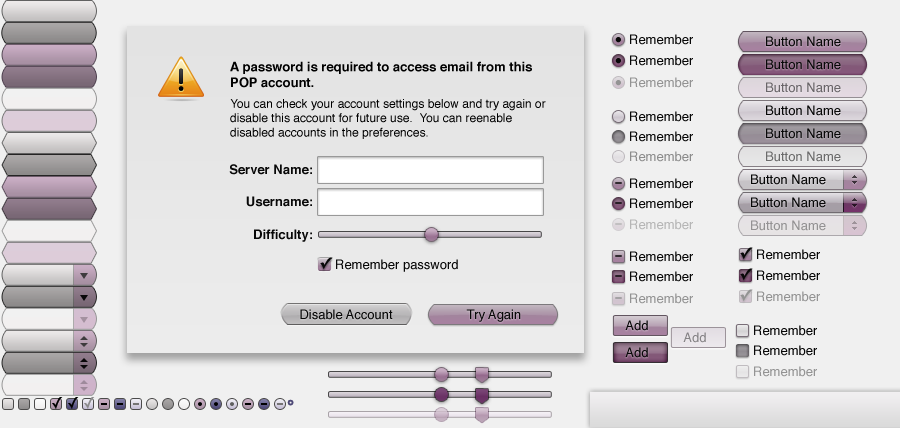
<style>
.page{position:relative;width:900px;height:428px;background:#f0f0f0}
.page>*{position:absolute;margin:0}
.t1{font:11px "LucidaGrande-Bold";color:#080808}
.t2{font:13px "Helvetica";color:#080808}
.t3{font:13px "Helvetica-Bold";color:#000000}
.t4{font:13px "Helvetica";color:#939393}
.t5{font:11px "LucidaGrande-Bold";color:#939393}
.t6{font:13px "Helvetica";color:#6a6669}
.t7{font:12px "Helvetica";color:#000000}
.t8{font:13px "Helvetica";color:#8c8c8c}
.t9{font:13px "Helvetica";color:#6c6b6c}
.t10{font:13px "Helvetica-Bold";color:#080808}
.t11{font:16px "LucidaGrande-Bold";scale:0.9 1}
.t12{font:13px "Helvetica";color:#b6b6b6}
.t13{font:13px "Helvetica";color:#949293}
.t14{font:16px "LucidaGrande-Bold";color:#080808}
.t15{font:16px "LucidaGrande-Bold";color:#939393}
.t16{font:13px "Helvetica";color:#858385}
</style>
<div class="page">
<p class="t1" style="left:615px;top:37px;width:6px;height:6px">•</p>
<p class="t2" style="left:630px;top:34px;width:63px;height:11px">Remember</p>
<p class="t2" style="left:766px;top:36px;width:75px;height:11px">Button Name</p>
<p class="t3" style="left:230px;top:61px;width:302px;height:27px">A password is required to access email from this POP account.</p>
<p class="t1" style="left:615px;top:58px;width:6px;height:6px">•</p>
<p class="t2" style="left:630px;top:55px;width:63px;height:11px">Remember</p>
<p class="t2" style="left:766px;top:59px;width:75px;height:11px">Button Name</p>
<p class="t4" style="left:630px;top:77px;width:63px;height:11px">Remember</p>
<p class="t5" style="left:615px;top:80px;width:6px;height:6px">•</p>
<p class="t6" style="left:766px;top:82px;width:75px;height:11px">Button Name</p>
<p class="t7" style="left:230px;top:99px;width:316px;height:40px">You can check your account settings below and try again or disable this account for future use.  You can reenable disabled accounts in the preferences.</p>
<p class="t2" style="left:630px;top:111px;width:63px;height:11px">Remember</p>
<p class="t2" style="left:766px;top:105px;width:75px;height:11px">Button Name</p>
<p class="t2" style="left:630px;top:131px;width:63px;height:11px">Remember</p>
<p class="t2" style="left:766px;top:128px;width:75px;height:11px">Button Name</p>
<p class="t8" style="left:630px;top:151px;width:63px;height:11px">Remember</p>
<p class="t9" style="left:766px;top:151px;width:75px;height:11px">Button Name</p>
<p class="t10" style="left:229px;top:164px;width:83px;height:11px">Server Name:</p>
<p class="t2" style="left:751px;top:174px;width:75px;height:11px">Button Name</p>
<p class="t11" style="left:615px;top:182px;width:7px;height:2px">-</p>
<p class="t2" style="left:630px;top:178px;width:63px;height:11px">Remember</p>
<p class="t10" style="left:246px;top:196px;width:66px;height:11px">Username:</p>
<p class="t2" style="left:630px;top:198px;width:63px;height:11px">Remember</p>
<p class="t2" style="left:751px;top:197px;width:75px;height:11px">Button Name</p>
<p class="t11" style="left:615px;top:202px;width:7px;height:2px">-</p>
<p class="t12" style="left:630px;top:219px;width:63px;height:11px">Remember</p>
<p class="t13" style="left:751px;top:220px;width:75px;height:11px">Button Name</p>
<p class="t10" style="left:254px;top:229px;width:58px;height:13px">Difficulty:</p>
<p class="t11" style="left:615px;top:223px;width:7px;height:2px">-</p>
<p class="t14" style="left:320px;top:257px;width:13px;height:13px">✓</p>
<p class="t11" style="left:615px;top:255px;width:7px;height:2px">-</p>
<p class="t2" style="left:630px;top:251px;width:63px;height:11px">Remember</p>
<p class="t14" style="left:740px;top:247px;width:13px;height:13px">✓</p>
<p class="t2" style="left:757px;top:249px;width:63px;height:11px">Remember</p>
<p class="t2" style="left:336px;top:259px;width:122px;height:13px">Remember password</p>
<p class="t14" style="left:740px;top:268px;width:13px;height:13px">✓</p>
<p class="t2" style="left:757px;top:270px;width:63px;height:11px">Remember</p>
<p class="t11" style="left:615px;top:275px;width:7px;height:2px">-</p>
<p class="t2" style="left:630px;top:271px;width:63px;height:11px">Remember</p>
<p class="t4" style="left:630px;top:293px;width:63px;height:11px">Remember</p>
<p class="t15" style="left:740px;top:289px;width:13px;height:13px">✓</p>
<p class="t4" style="left:757px;top:291px;width:63px;height:11px">Remember</p>
<p class="t11" style="left:615px;top:297px;width:7px;height:2px">-</p>
<p class="t2" style="left:300px;top:309px;width:93px;height:11px">Disable Account</p>
<p class="t2" style="left:466px;top:309px;width:55px;height:13px">Try Again</p>
<p class="t2" style="left:625px;top:320px;width:23px;height:11px">Add</p>
<p class="t2" style="left:754px;top:325px;width:63px;height:11px">Remember</p>
<p class="t16" style="left:683px;top:332px;width:23px;height:11px">Add</p>
<p class="t2" style="left:625px;top:347px;width:23px;height:11px">Add</p>
<p class="t2" style="left:754px;top:345px;width:63px;height:11px">Remember</p>
<p class="t4" style="left:754px;top:366px;width:63px;height:11px">Remember</p>
</div>
